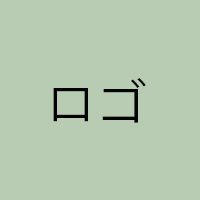
<style>
.page{position:relative;width:200px;height:200px;background:#b7ccb2}
.page>*{position:absolute;margin:0}
.t1{font:50px "KozGoPr6N-Regular";color:#030303}
</style>
<div class="page">
<p class="t1" style="left:53px;top:78px;width:93px;height:45px">ロゴ</p>
</div>
